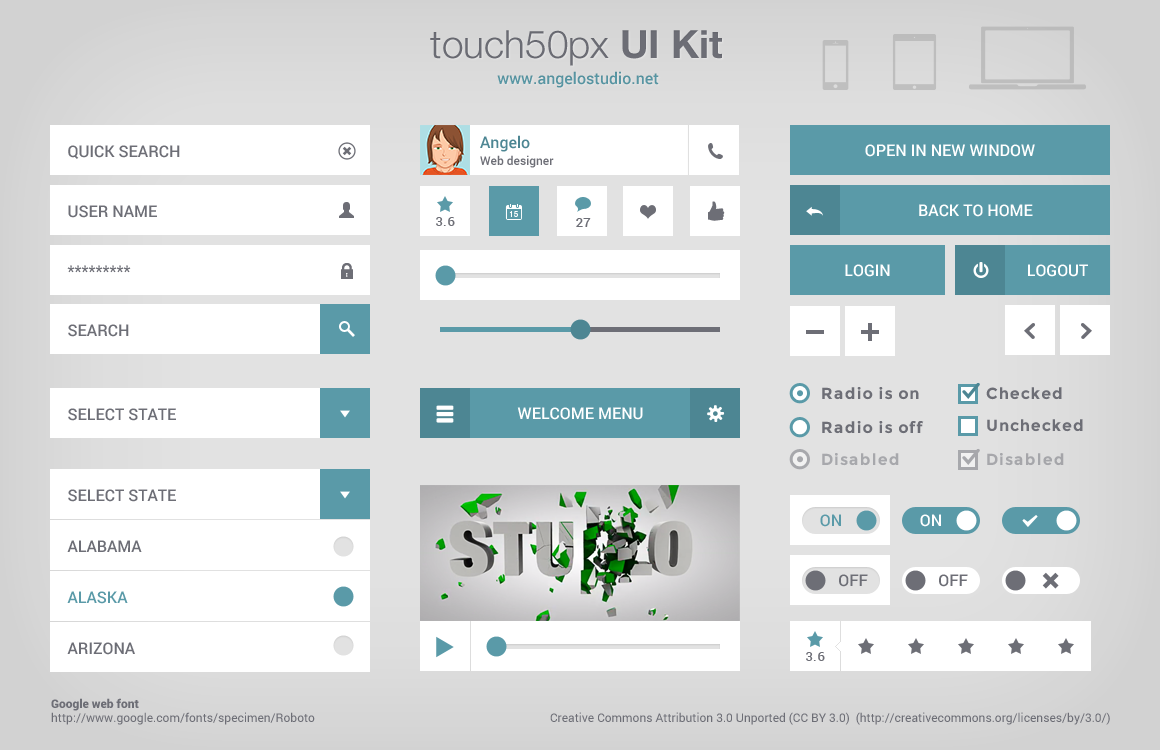
<style>
.page{position:relative;width:1160px;height:750px;background:#ffffff}
.page>*{position:absolute;margin:0}
.t1{font:16px "Roboto-Medium";color:#5a9aa8}
.t2{font:12px/17px "Roboto-Medium";color:#6d6e76}
.t3{font:16px "Roboto-Medium";color:#4d8693}
.t4{font:16px "Roboto-Medium";color:#6d6e76;text-transform:uppercase}
.t5{font:16px "Roboto-Medium";color:#ffffff}
.t6{font:16px "Roboto-Medium";color:#6d6e76}
.t7{font:13px "Roboto-Medium";letter-spacing:0.06em;color:#6d6e76}
.t8{font:16px "Montserrat-Bold";letter-spacing:0.06em;color:#6d6e76}
.t9{font:16px "Montserrat-Bold";letter-spacing:0.06em;color:#a7a8ac}
.t10{font:16px "Montserrat-Bold";letter-spacing:0.06em;color:#a6a6aa}
.t11{font:16px "Roboto-Medium";color:#5a9aa8;text-transform:uppercase}
.t12{font:12px "Roboto-Regular";color:#6d6e76}
.t13{font:12px "Roboto-Black";color:#6d6e76}
</style>
<div class="page">
<p class="t1" style="left:497px;top:71px;width:162px;height:17px">www.angelostudio.net</p>
<p class="t2" style="left:480px;top:135px;width:74px;height:33px"><span class="t3">Angelo<br></span>Web designer</p>
<p class="t4" style="left:68px;top:145px;width:112px;height:14px">quick search</p>
<p class="t5" style="left:865px;top:144px;width:170px;height:13px">OPEN IN NEW WINDOW</p>
<p class="t6" style="left:68px;top:205px;width:89px;height:13px">USER NAME</p>
<p class="t5" style="left:919px;top:204px;width:114px;height:13px">BACK TO HOME</p>
<p class="t7" style="left:436px;top:217px;width:19px;height:9px">3.6</p>
<p class="t7" style="left:576px;top:218px;width:15px;height:9px">27</p>
<p class="t6" style="left:67px;top:265px;width:64px;height:8px">*********</p>
<p class="t5" style="left:845px;top:264px;width:45px;height:13px">LOGIN</p>
<p class="t5" style="left:1028px;top:264px;width:60px;height:13px">LOGOUT</p>
<p class="t6" style="left:68px;top:324px;width:61px;height:13px">SEARCH</p>
<p class="t8" style="left:822px;top:387px;width:97px;height:13px">Radio is on</p>
<p class="t8" style="left:986px;top:387px;width:76px;height:13px">Checked</p>
<p class="t4" style="left:68px;top:408px;width:108px;height:13px">select state</p>
<p class="t5" style="left:517px;top:407px;width:126px;height:13px">WELCOME MENU</p>
<p class="t8" style="left:822px;top:421px;width:102px;height:13px">Radio is off</p>
<p class="t8" style="left:987px;top:419px;width:96px;height:13px">Unchecked</p>
<p class="t9" style="left:822px;top:453px;width:77px;height:13px">Disabled</p>
<p class="t10" style="left:987px;top:453px;width:77px;height:13px">Disabled</p>
<p class="t4" style="left:68px;top:489px;width:108px;height:13px">select state</p>
<p class="t1" style="left:820px;top:514px;width:21px;height:13px">ON</p>
<p class="t5" style="left:920px;top:514px;width:21px;height:13px">ON</p>
<p class="t4" style="left:67px;top:540px;width:75px;height:12px">ALABAMA</p>
<p class="t6" style="left:839px;top:574px;width:29px;height:13px">OFF</p>
<p class="t6" style="left:939px;top:574px;width:29px;height:13px">OFF</p>
<p class="t11" style="left:67px;top:591px;width:61px;height:13px">ALASKA</p>
<p class="t4" style="left:67px;top:642px;width:68px;height:13px">ARIZONA</p>
<p class="t7" style="left:806px;top:652px;width:19px;height:9px">3.6</p>
<p class="t12" style="left:51px;top:698px;width:264px;height:27px"><span class="t13">Google web font</span><br>http://www.google.com/fonts/specimen/Roboto</p>
<p class="t12" style="left:550px;top:712px;width:560px;height:13px">Creative Commons Attribution 3.0 Unported (CC BY 3.0)  (http://creativecommons.org/licenses/by/3.0/)</p>
</div>
